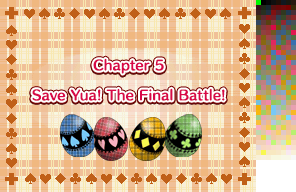
<style>
.page{position:relative;width:296px;height:192px}
.page>*{position:absolute;margin:0}
.t1{font:13px/30px "HummingStd-B";letter-spacing:0.02em;color:#d80848}
</style>
<div class="page">
<p class="t1" style="left:32px;top:58px;width:193px;height:43px;text-align:center">Chapter 5<br>Save Yua! The Final Battle!</p>
</div>
